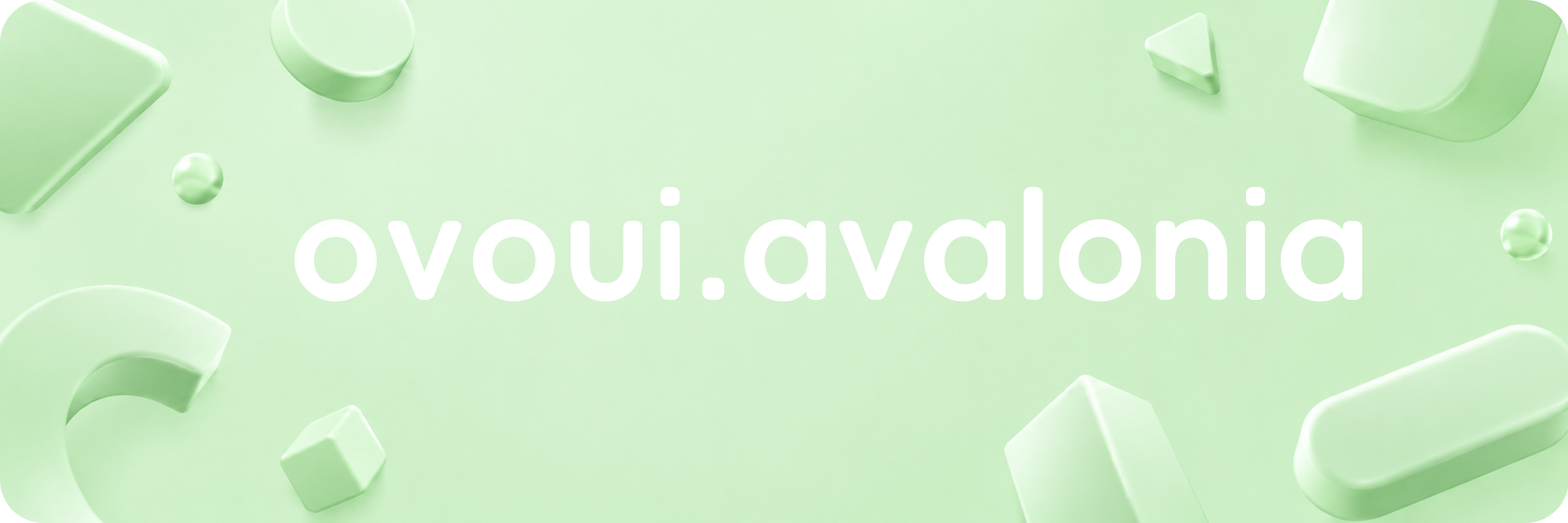
<style>
.page{position:relative;width:1568px;height:523px}
.page>*{position:absolute;margin:0}
.t1{font:148.7px "AlimamaFangYuanTi-Bold";color:#ffffff}
</style>
<div class="page">
<p class="t1" style="left:295px;top:186px;width:1067px;height:116px">ovoui.avalonia</p>
</div>
